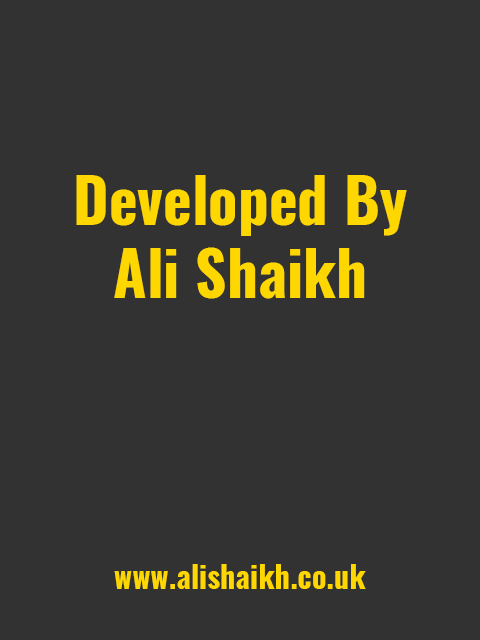
<style>
.page{position:relative;width:480px;height:640px;background:#323232}
.page>*{position:absolute;margin:0}
.t1{font:61px "Oswald-Bold";color:#ffd700}
.t2{font:30.5px "Oswald-Bold";color:#ffd700}
</style>
<div class="page">
<p class="t1" style="left:76px;top:175px;width:331px;height:124px;text-align:center">Developed By<br>Ali Shaikh</p>
<p class="t2" style="left:114px;top:564px;width:252px;height:25px">www.alishaikh.co.uk</p>
</div>
